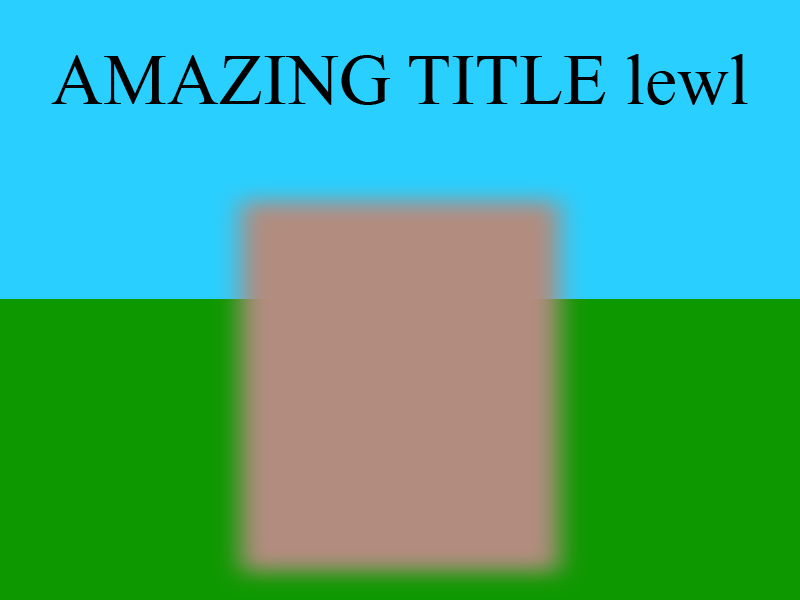
<style>
.page{position:relative;width:800px;height:600px;background:#29cfff}
.page>*{position:absolute;margin:0}
.t1{font:72px "MongolianBaiti";color:#000000}
</style>
<div class="page">
<p class="t1" style="left:51px;top:54px;width:697px;height:51px">AMAZING TITLE lewl</p>
</div>
